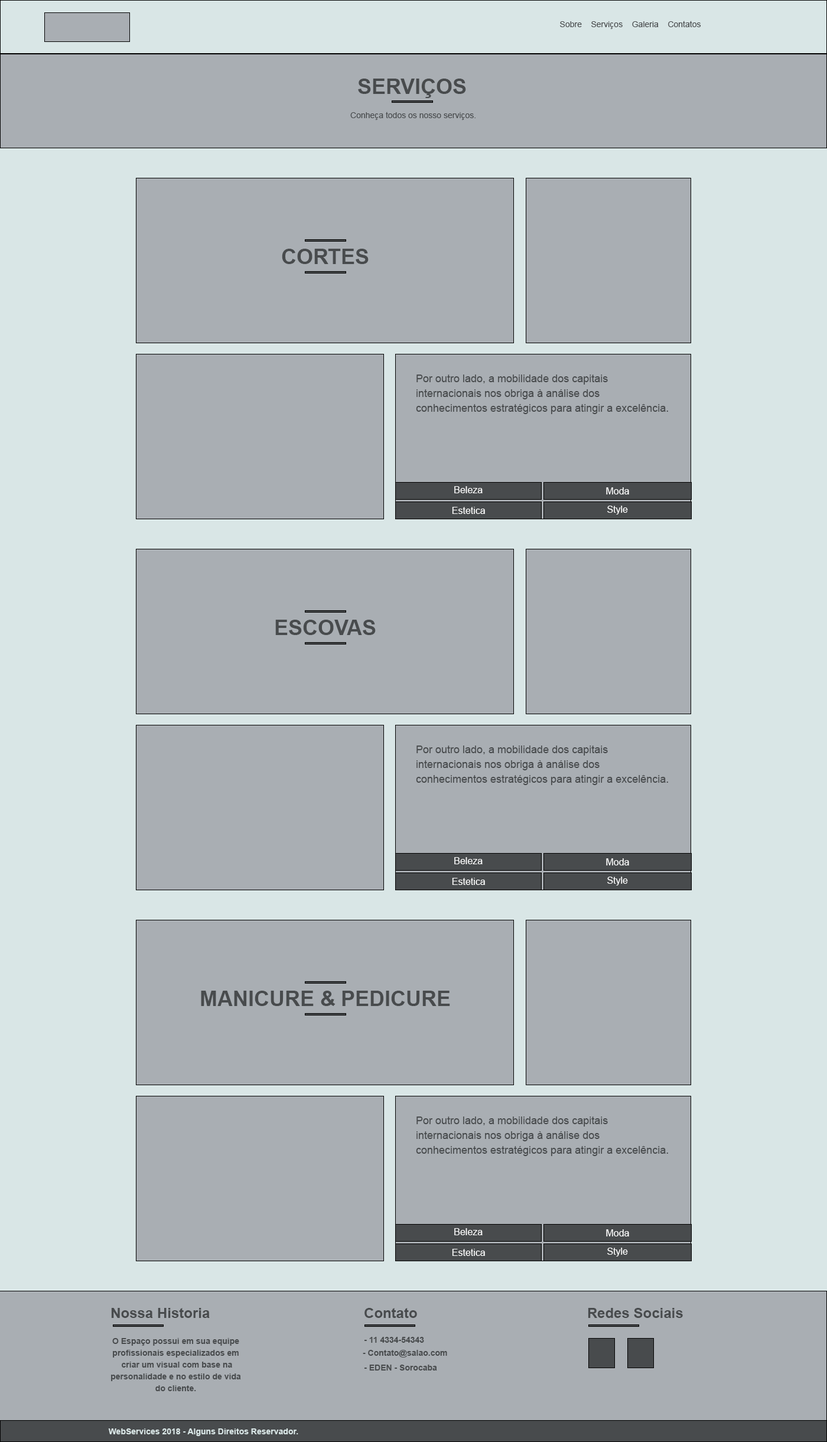
<style>
.page{position:relative;width:827px;height:1442px;background:#a9aeb3}
.page>*{position:absolute;margin:0}
.t1{font:8.3px "ArialMT";color:#484b4d}
.t2{font:21.3px "Arial-BoldMT";color:#484b4d;text-transform:uppercase}
.t3{font:10.6px/14.8px "ArialMT";color:#484b4d}
.t4{font:9.5px "ArialMT";color:#ffffff}
.t5{font:14.1px "Arial-BoldMT";color:#484b4d}
.t6{font:8.2px/11.8px "Arial-BoldMT";color:#484b4d}
.t7{font:8.3px "Arial-BoldMT";color:#484b4d}
.t8{font:8.3px "Arial-BoldMT";color:#d9e6e6}
</style>
<div class="page">
<p class="t1" style="left:560px;top:21px;width:141px;height:8px">Sobre    Serviços    Galeria    Contatos</p>
<p class="t2" style="left:358px;top:79px;width:108px;height:19px">Serviços</p>
<p class="t1" style="left:350px;top:112px;width:126px;height:8px">Conheça todos os nosso serviços.</p>
<p class="t2" style="left:282px;top:249px;width:87px;height:15px">Cortes</p>
<p class="t3" style="left:416px;top:375px;width:252px;height:39px">Por outro lado, a mobilidade dos capitais internacionais nos obriga à análise dos conhecimentos estratégicos para atingir a excelência.</p>
<p class="t4" style="left:454px;top:486px;width:29px;height:7px">Beleza</p>
<p class="t4" style="left:606px;top:487px;width:23px;height:7px">Moda</p>
<p class="t4" style="left:452px;top:507px;width:33px;height:7px">Estetica</p>
<p class="t4" style="left:607px;top:506px;width:21px;height:9px">Style</p>
<p class="t2" style="left:275px;top:620px;width:101px;height:15px">Escovas</p>
<p class="t3" style="left:416px;top:745px;width:252px;height:40px">Por outro lado, a mobilidade dos capitais internacionais nos obriga à análise dos conhecimentos estratégicos para atingir a excelência.</p>
<p class="t4" style="left:454px;top:857px;width:29px;height:7px">Beleza</p>
<p class="t4" style="left:606px;top:858px;width:23px;height:7px">Moda</p>
<p class="t4" style="left:452px;top:878px;width:33px;height:7px">Estetica</p>
<p class="t4" style="left:607px;top:877px;width:21px;height:8px">Style</p>
<p class="t2" style="left:201px;top:991px;width:249px;height:15px">Manicure &amp; Pedicure</p>
<p class="t3" style="left:416px;top:1116px;width:252px;height:40px">Por outro lado, a mobilidade dos capitais internacionais nos obriga à análise dos conhecimentos estratégicos para atingir a excelência.</p>
<p class="t4" style="left:454px;top:1228px;width:29px;height:7px">Beleza</p>
<p class="t4" style="left:606px;top:1229px;width:23px;height:7px">Moda</p>
<p class="t4" style="left:452px;top:1249px;width:33px;height:7px">Estetica</p>
<p class="t4" style="left:607px;top:1248px;width:21px;height:8px">Style</p>
<p class="t5" style="left:111px;top:1308px;width:99px;height:10px">Nossa Historia</p>
<p class="t5" style="left:364px;top:1308px;width:53px;height:10px">Contato</p>
<p class="t5" style="left:588px;top:1308px;width:95px;height:10px">Redes Sociais</p>
<p class="t6" style="left:111px;top:1338px;width:130px;height:53px;text-align:center">O Espaço possui em sua equipe profissionais especializados em<br> criar um visual com base na personalidade e no estilo de vida <br>do cliente.</p>
<p class="t7" style="left:364px;top:1337px;width:60px;height:6px">- 11 4334-54343</p>
<p class="t7" style="left:363px;top:1350px;width:84px;height:7px">- Contato@salao.com</p>
<p class="t7" style="left:364px;top:1365px;width:73px;height:5px">- EDEN - Sorocaba</p>
<p class="t8" style="left:108px;top:1428px;width:190px;height:8px">WebServices 2018 - Alguns Direitos Reservador.</p>
</div>
